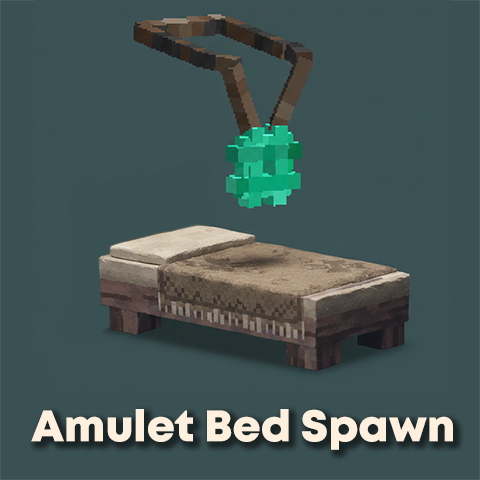
<style>
.page{position:relative;width:480px;height:480px;background:#3a5154}
.page>*{position:absolute;margin:0}
.t1{font:44px "Mont-HeavyDEMO";color:#fdf0df}
</style>
<div class="page">
<p class="t1" style="left:31px;top:409px;width:422px;height:41px">Amulet Bed Spawn</p>
</div>
